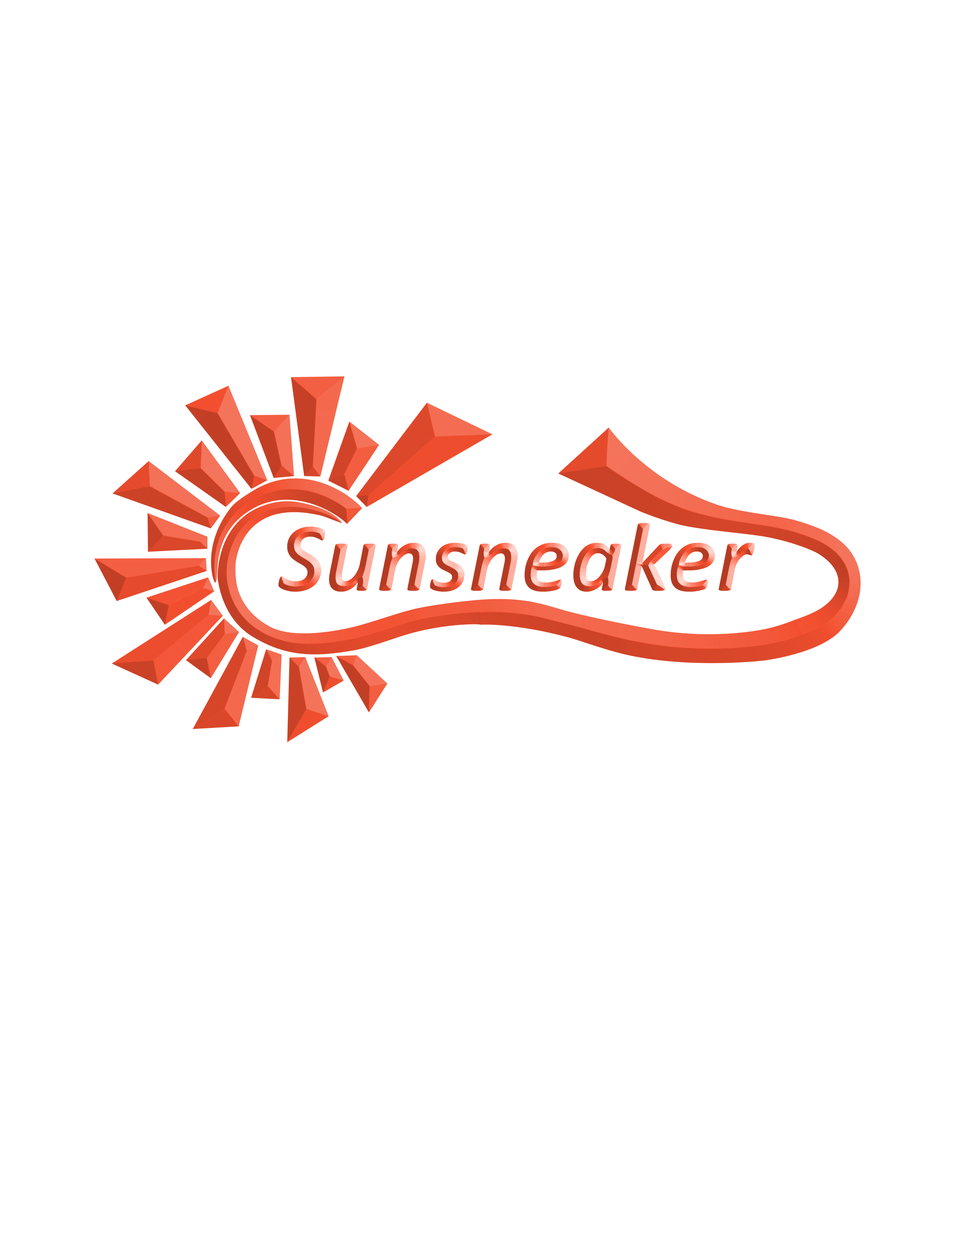
<style>
.page{position:relative;width:960px;height:1242px;background:#ffffff}
.page>*{position:absolute;margin:0}
.t1{font:99.4px "Calibri-BoldItalic"}
</style>
<div class="page">
<p class="t1" style="left:278px;top:523px;width:477px;height:69px">Sunsneaker</p>
</div>
